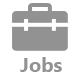
<style>
.page{position:relative;width:80px;height:83px;background:#ffffff}
.page>*{position:absolute;margin:0}
.t1{font:20px "SegoeUI-Bold";color:#929292}
</style>
<div class="page">
<p class="t1" style="left:20px;top:57px;width:42px;height:15px">Jobs</p>
</div>
